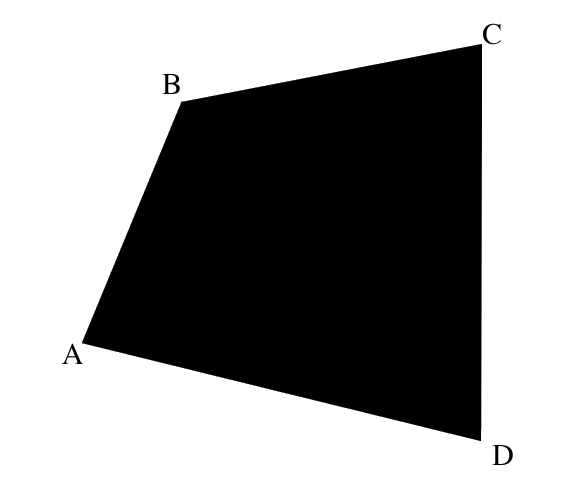
<style>
.page{position:relative;width:564px;height:484px;background:#ffffff}
.page>*{position:absolute;margin:0}
.t1{font:30px "Times-Roman";color:#000000}
</style>
<div class="page">
<p class="t1" style="left:483px;top:23px;width:18px;height:22px">C</p>
<p class="t1" style="left:162px;top:74px;width:18px;height:20px">B</p>
<p class="t1" style="left:62px;top:343px;width:21px;height:21px">A</p>
<p class="t1" style="left:492px;top:445px;width:21px;height:20px">D</p>
</div>
